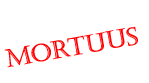
<style>
.page{position:relative;width:149px;height:83px;background:#ffffff}
.page>*{position:absolute;margin:0}
.t1{font:24px "Castellar";color:#fe0000}
</style>
<div class="page">
<p class="t1" style="left:4px;top:26px;width:134px;height:42px;rotate:-10deg">MORTUUS</p>
</div>
